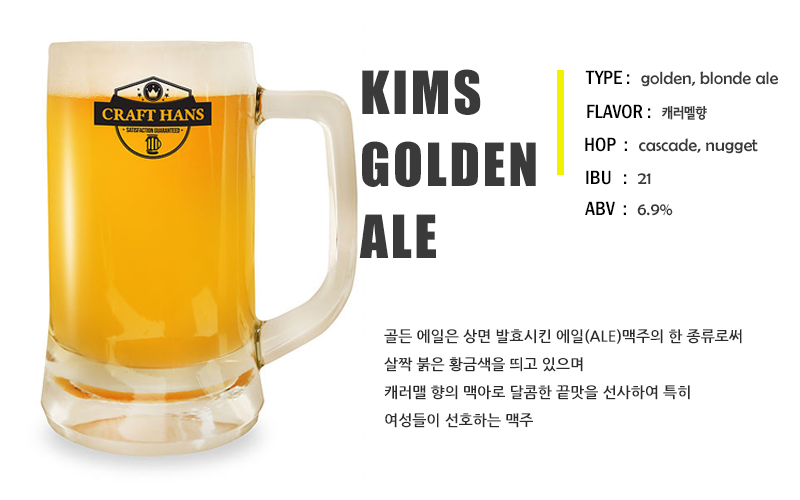
<style>
.page{position:relative;width:800px;height:500px;background:#ffffff}
.page>*{position:absolute;margin:0}
.t1{font:55px/72px "Impact";letter-spacing:0.05em;color:#3a3a3a}
.t2{font:18px "BerlinSansFB-Reg";color:#3a3a3a}
.t3{font:20px "FranklinGothic-MediumCond";color:#000000}
.t4{font:14px "SeN-CBL";color:#3a3a3a}
.t5{font:15px/28px "NanumGothicBold";color:#2b2b2b}
</style>
<div class="page">
<p class="t1" style="left:359px;top:69px;width:177px;height:189px">KIMS<br>GOLDEN<br>ALE</p>
<p class="t2" style="left:585px;top:70px;width:193px;height:17px"><span class="t3">TYPE :  </span>golden, blonde ale</p>
<p class="t3" style="left:587px;top:104px;width:120px;height:16px">FLAVOR :  <span class="t4">캐러멜향</span></p>
<p class="t2" style="left:585px;top:137px;width:173px;height:17px"><span class="t3">HOP  :  </span>cascade, nugget</p>
<p class="t3" style="left:586px;top:170px;width:65px;height:15px">IBU   :  <span class="t2">21</span></p>
<p class="t3" style="left:585px;top:201px;width:88px;height:15px">ABV  :  <span class="t2">6.9%</span></p>
<p class="t5" style="left:384px;top:329px;width:358px;height:99px">골든 에일은 상면 발효시킨 에일(ALE)맥주의 한 종류로써 <br>살짝 붉은 황금색을 띄고 있으며 <br>캐러맬 향의 맥아로 달콤한 끝맛을 선사하여 특히<br>여성들이 선호하는 맥주</p>
</div>
